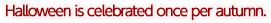
<style>
.page{position:relative;width:271px;height:23px;background:#ffffff}
.page>*{position:absolute;margin:0}
.t1{font:14px "UDShinGoPro-Regular";letter-spacing:-0.09em;color:#a40000;font-weight:bold}
</style>
<div class="page">
<p class="t1" style="left:6px;top:4px;width:260px;height:16px">Halloween is celebrated once per autumn.</p>
</div>
